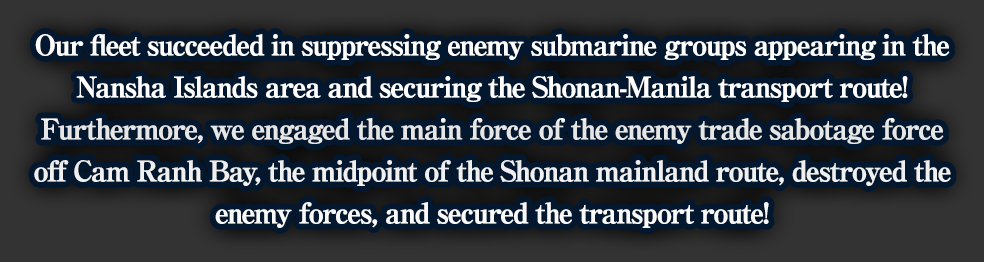
<style>
.page{position:relative;width:984px;height:262px;background:#03172f}
.page>*{position:absolute;margin:0}
.t1{font:28px/42px "RyuminPro-ExBold";letter-spacing:-0.08em;color:#ffffff;font-weight:bold}
</style>
<div class="page">
<p class="t1" style="left:34px;top:34px;width:917px;height:194px;text-align:center">Our fleet succeeded in suppressing enemy submarine groups appearing in the<br>Nansha Islands area and securing the Shonan-Manila transport route!<br>Furthermore, we engaged the main force of the enemy trade sabotage force<br>off Cam Ranh Bay, the midpoint of the Shonan mainland route, destroyed the<br>enemy forces, and secured the transport route!</p>
</div>
